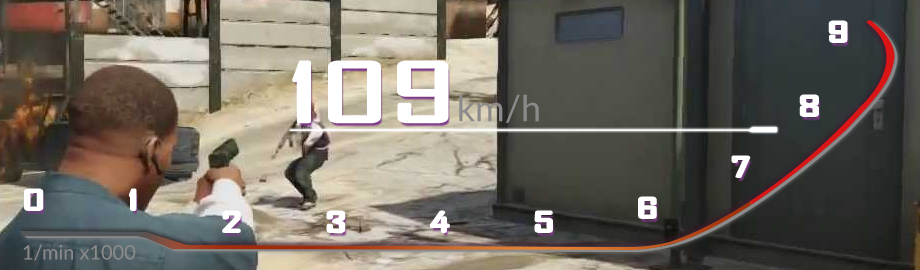
<style>
.page{position:relative;width:920px;height:270px}
.page>*{position:absolute;margin:0}
.t1{font:25.6px "AgencyFB-Reg";letter-spacing:1.58em;color:#ffffff;scale:2.05 1}
.t2{font:78.1px "AgencyFB-Reg";color:#ffffff;scale:2.05 1}
.t3{font:36px "Lato-Regular";color:#8b8a8b}
.t4{font:20px "Lato-Regular";color:#8b8a8b}
</style>
<div class="page">
<p class="t1" style="left:830px;top:22px;width:16px;height:20px">9</p>
<p class="t2" style="left:293px;top:62px;width:154px;height:60px">109</p>
<p class="t3" style="left:459px;top:94px;width:80px;height:29px">km/h</p>
<p class="t1" style="left:801px;top:96px;width:17px;height:20px">8</p>
<p class="t1" style="left:733px;top:157px;width:16px;height:20px">7</p>
<p class="t1" style="left:25px;top:190px;width:110px;height:20px">01</p>
<p class="t1" style="left:639px;top:198px;width:17px;height:20px">6</p>
<p class="t1" style="left:223px;top:212px;width:329px;height:20px">2345</p>
<p class="t4" style="left:23px;top:244px;width:113px;height:17px">1/min x1000</p>
</div>
